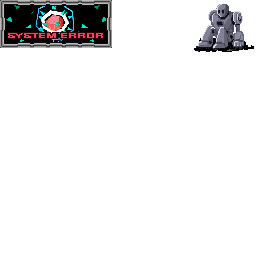
<style>
.page{position:relative;width:256px;height:256px;background:#ffffff}
.page>*{position:absolute;margin:0}
.t1{font:8px "EurostileT-RegExt";color:#f74465;font-weight:bold}
</style>
<div class="page">
<p class="t1" style="left:8px;top:33px;width:95px;height:5px">SYSTEM ERROR</p>
</div>
